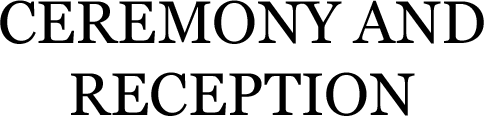
<style>
.page{position:relative;width:484px;height:116px;background:#ffffff}
.page>*{position:absolute;margin:0}
.t1{font:60px "Georgia";color:#000000}
</style>
<div class="page">
<p class="t1" style="left:0px;top:0px;width:484px;height:116px;text-align:center">CEREMONY AND RECEPTION</p>
</div>
